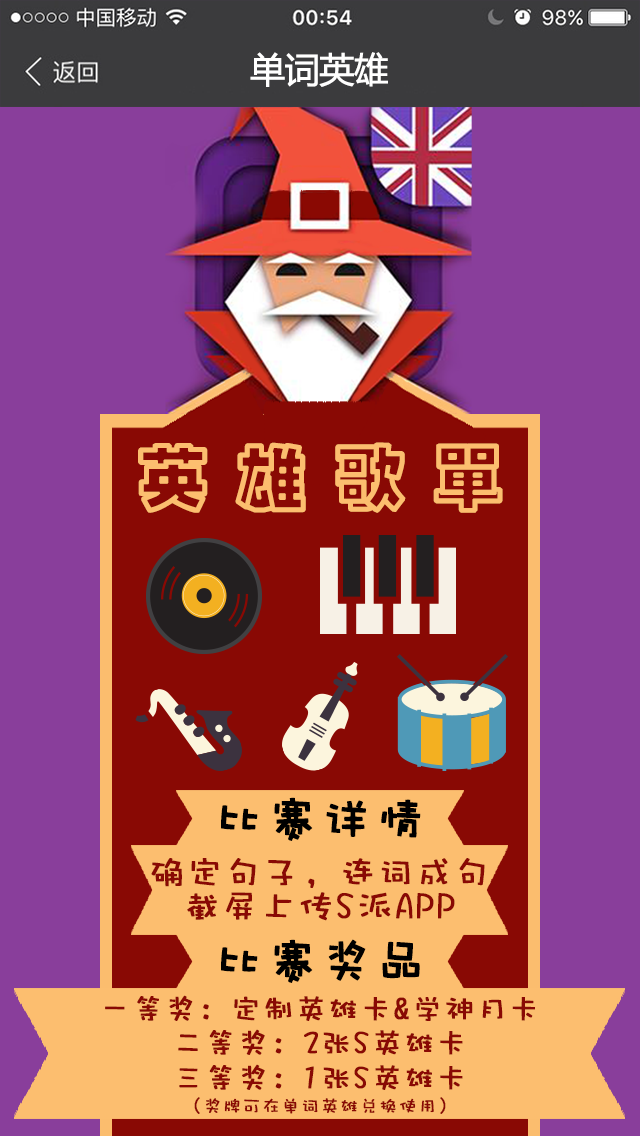
<style>
.page{position:relative;width:640px;height:1136px;background:#893e9b}
.page>*{position:absolute;margin:0}
.t1{font:35px "MicrosoftYaHei";letter-spacing:-0.04em;color:#ffffff;font-weight:bold}
.t2{font:72px "¾­µä¿ÕµþºÚ Regular";letter-spacing:0.34em;color:#fcbe6f;font-weight:bold}
.t3{font:48px "DFWaWaW5";letter-spacing:0.1em;color:#000000;font-weight:bold}
.t4{font:35px/34.3px "DFWaWaW5";letter-spacing:0.06em;color:#890904;font-weight:bold}
.t5{font:30px/34.3px "DFWaWaW5";letter-spacing:0.06em;color:#890904;font-weight:bold}
.t6{font:18px/34.3px "DFWaWaW5";letter-spacing:0.06em;color:#890904;font-weight:bold}
</style>
<div class="page">
<p class="t1" style="left:250px;top:52px;width:138px;height:35px">单词英雄</p>
<p class="t2" style="left:138px;top:442px;width:365px;height:71px">英雄歌单</p>
<p class="t3" style="left:221px;top:797px;width:200px;height:44px">比赛详情</p>
<p class="t4" style="left:151px;top:858px;width:334px;height:63px;text-align:center">确定句子，连词成句<br>截屏上传S派APP</p>
<p class="t3" style="left:221px;top:939px;width:199px;height:44px">比赛奖品</p>
<p class="t5" style="left:105px;top:995px;width:430px;height:119px;text-align:center">一等奖：定制英雄卡&amp;学神月卡<br>二等奖：2张S英雄卡<br>三等奖：1张S英雄卡<br><span class="t6">（奖牌可在单词英雄兑换使用）</span></p>
</div>
